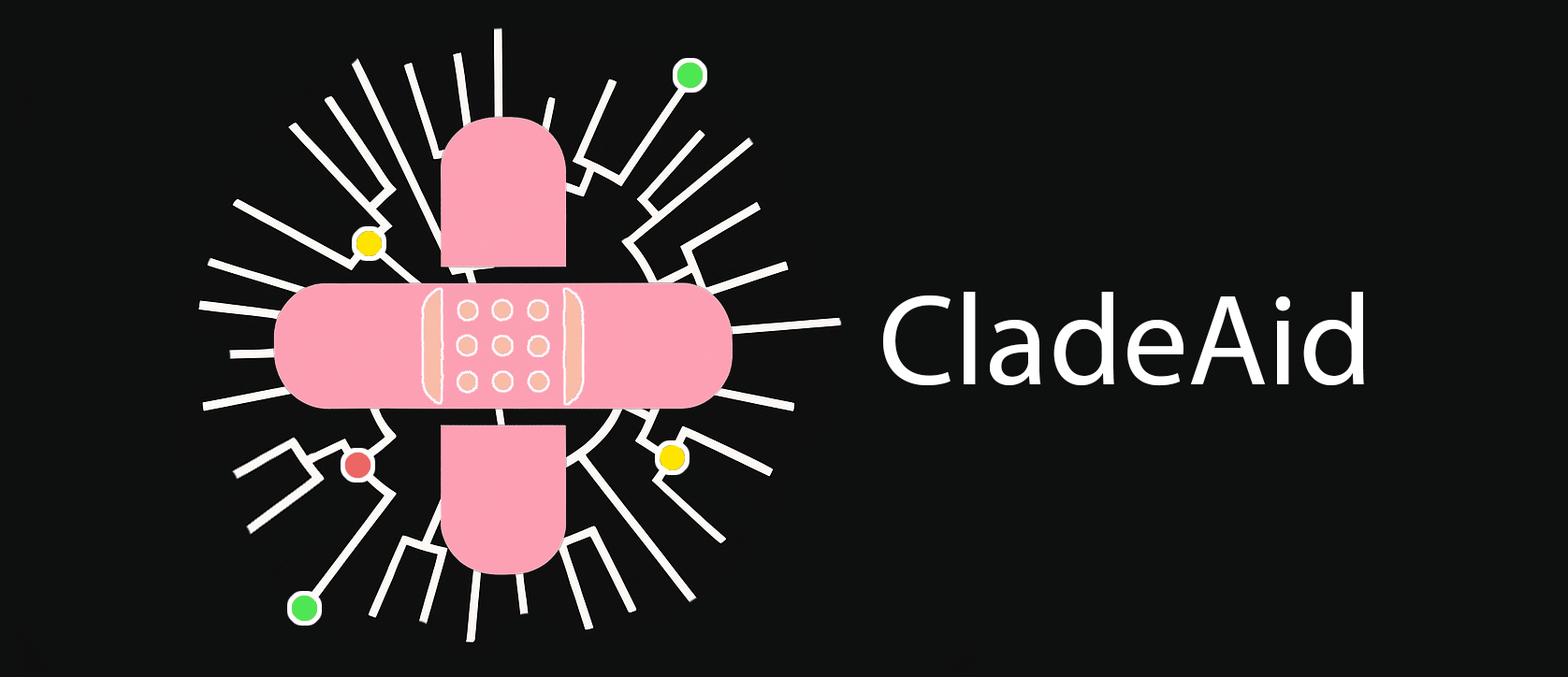
<style>
.page{position:relative;width:1568px;height:677px;background:#0e0f0f}
.page>*{position:absolute;margin:0}
.t1{font:131px "MyriadPro-Regular";color:#ffffff}
</style>
<div class="page">
<p class="t1" style="left:883px;top:292px;width:481px;height:94px">CladeAid</p>
</div>
